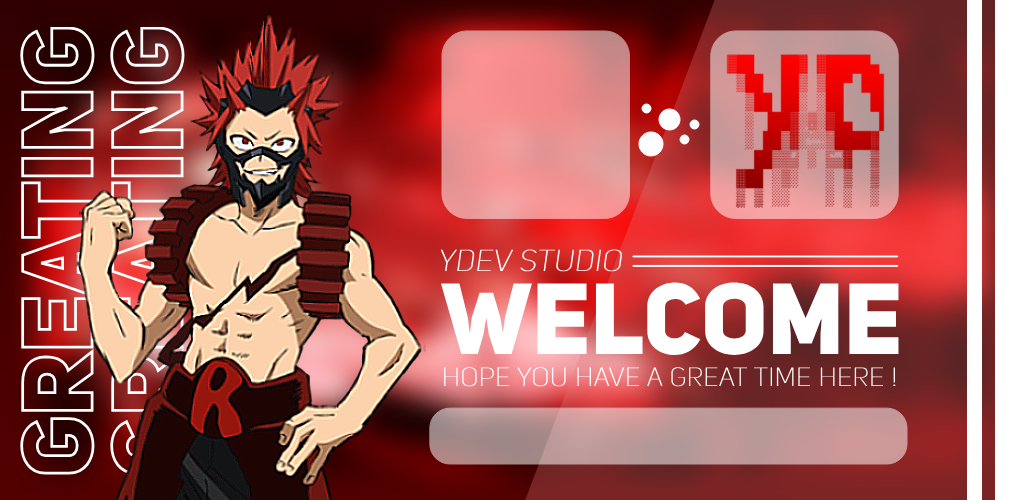
<style>
.page{position:relative;width:1024px;height:500px}
.page>*{position:absolute;margin:0}
.t1{font:98px "UniSansHeavyCAPS";color:#ffffff}
.t2{font:98px "UniSansHeavyCAPS"}
.t3{font:30px "UniSansThinItalicCAPS";color:#ffffff;font-weight:bold}
.t4{font:99.4px "UniSansHeavyCAPS";color:#ffffff}
.t5{font:26px "UniSansThinCAPS";color:#ffffff;font-weight:bold}
</style>
<div class="page">
<p class="t1" style="left:20px;top:27px;width:75px;height:448px;rotate:-90deg">GREATING</p>
<p class="t2" style="left:110px;top:27px;width:75px;height:448px;rotate:-90deg">GREATING</p>
<p class="t3" style="left:440px;top:249px;width:182px;height:23px">YDEV STUDIO</p>
<p class="t4" style="left:441px;top:282px;width:458px;height:73px">WELCOME</p>
<p class="t5" style="left:444px;top:367px;width:452px;height:20px">Hope you have a great time here !</p>
</div>
